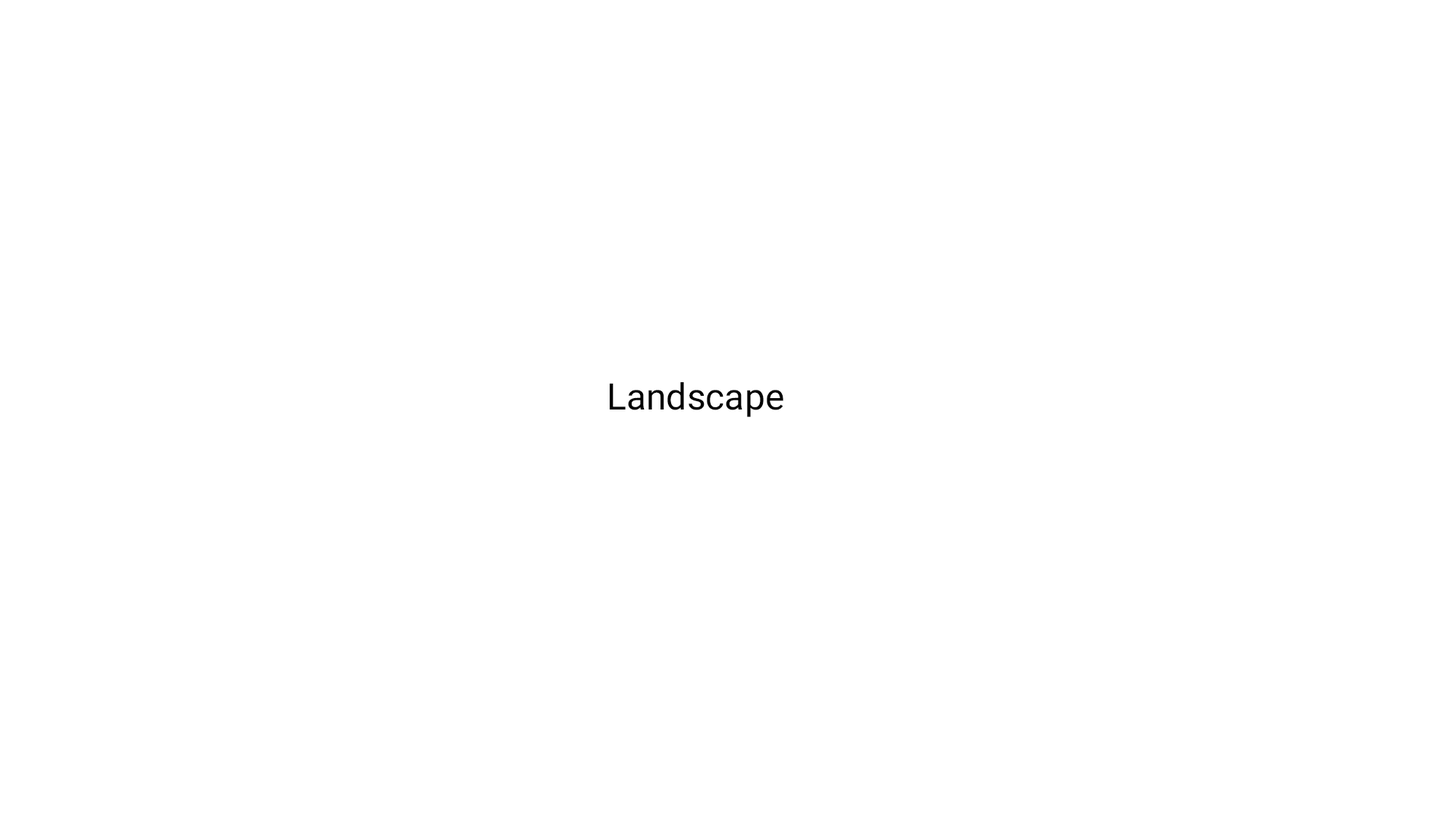
<style>
.page{position:relative;width:1456px;height:819px;background:#ffffff}
.page>*{position:absolute;margin:0}
.t1{font:36.4px "Roboto-Regular";color:#000000}
</style>
<div class="page">
<p class="t1" style="left:610px;top:382px;width:173px;height:35px">Landscape</p>
</div>
